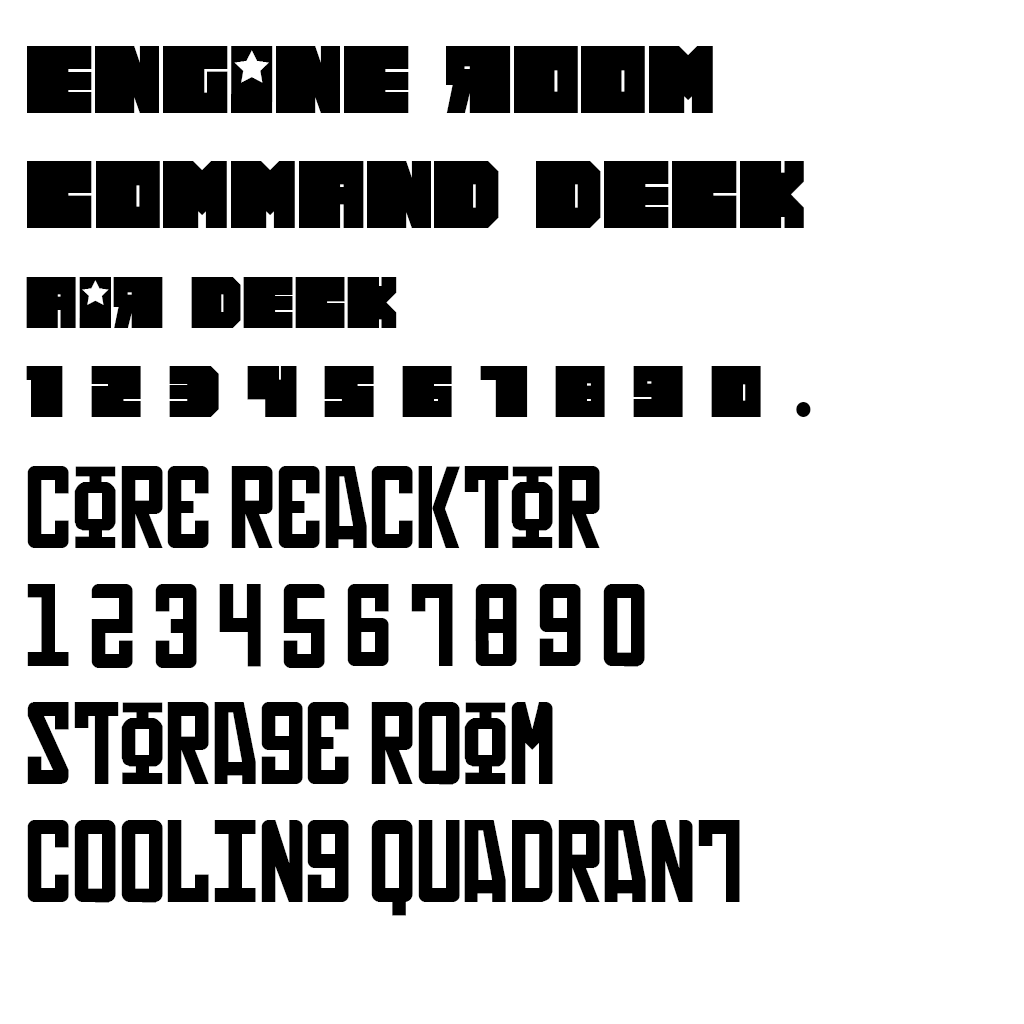
<style>
.page{position:relative;width:1024px;height:1024px;background:#ffffff}
.page>*{position:absolute;margin:0}
.t1{font:96.6px "Russiano-Regular";color:#000000}
.t2{font:73.8px "Russiano-Regular";color:#000000}
.t3{font:130.7px "TimesNewRomanPSMT";color:#000000}
.t4{font:98.4px "Russian";color:#000000}
</style>
<div class="page">
<p class="t1" style="left:27px;top:46px;width:686px;height:67px">engine room</p>
<p class="t1" style="left:27px;top:161px;width:777px;height:67px">command deck</p>
<p class="t2" style="left:26px;top:277px;width:735px;height:140px">air deck<br>1 2 3 4 5 6 7 8 9 0</p>
<p class="t3" style="left:796px;top:402px;width:15px;height:15px">.</p>
<p class="t4" style="left:27px;top:466px;width:713px;height:450px">Core reackTor<br>1 2 3 4 5 6 7 8 9 0<br>sTorage rOom<br>cOOliNg quadrant</p>
</div>
